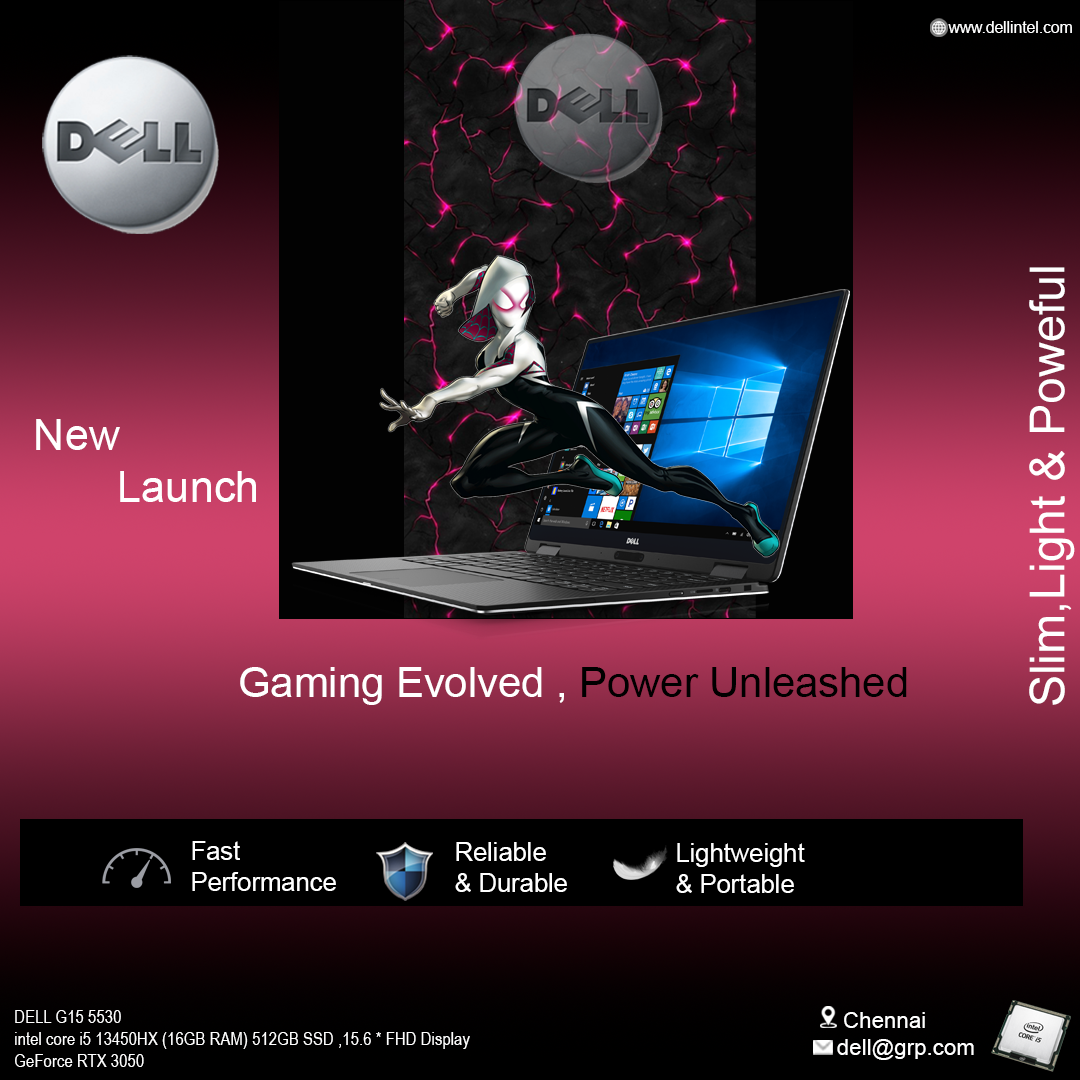
<style>
.page{position:relative;width:1080px;height:1080px}
.page>*{position:absolute;margin:0}
.t1{font:15.6px "ArialMT";color:#ffffff}
.t2{font:48.3px "ArialMT";color:#ffffff}
.t3{font:43.2px "ArialMT";color:#ffffff}
.t4{font:41.8px "ArialMT";color:#ffffff}
.t5{font:41.8px "ArialMT";color:#000000}
.t6{font:25.5px "ArialMT";color:#ffffff}
.t7{font:18.3px "ArialNarrow";color:#ffffff}
.t8{font:22.3px "ArialMT";color:#ffffff}
</style>
<div class="page">
<p class="t1" style="left:948px;top:21px;width:124px;height:12px">www.dellintel.com</p>
<p class="t2" style="left:1029px;top:267px;width:46px;height:438px;rotate:-90deg">Slim,Light &amp; Poweful</p>
<p class="t3" style="left:36px;top:419px;width:220px;height:83px">New<br>       Launch</p>
<p class="t4" style="left:240px;top:667px;width:667px;height:38px">Gaming Evolved , <span class="t5">Power Unleashed</span></p>
<p class="t6" style="left:192px;top:841px;width:144px;height:50px">Fast<br>Performance</p>
<p class="t6" style="left:455px;top:842px;width:112px;height:50px">Reliable<br>&amp; Durable</p>
<p class="t6" style="left:676px;top:843px;width:129px;height:50px">Lightweight<br>&amp; Portable</p>
<p class="t7" style="left:15px;top:1010px;width:455px;height:57px">DELL G15 5530<br>intel core i5 13450HX (16GB RAM) 512GB SSD ,15.6 * FHD Display<br>GeForce RTX 3050</p>
<p class="t8" style="left:837px;top:1012px;width:137px;height:48px">Chennai<br>dell@grp.com</p>
</div>
